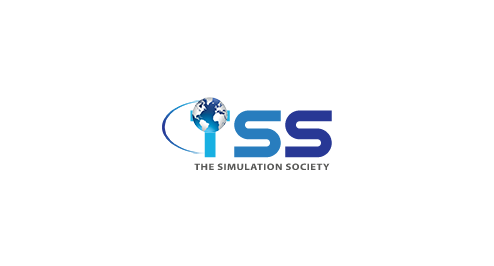
<style>
.page{position:relative;width:494px;height:266px;background:#ffffff}
.page>*{position:absolute;margin:0}
.t1{font:69.4px "Neighbor-Regular";color:#18b0e2}
.t2{font:69.4px "Neighbor-Regular";color:#287dbe}
.t3{font:69.4px "Neighbor-Regular";color:#283895}
.t4{font:9.4px "MyriadConceptRoman-Bold";letter-spacing:0.04em;color:#585856;scale:1.14 1}
</style>
<div class="page">
<p class="t1" style="left:190px;top:110px;width:142px;height:48px">T<span class="t2">S</span><span class="t3">S</span></p>
<p class="t4" style="left:194px;top:163px;width:136px;height:7px">THE SIMULATION SOCIETY</p>
</div>
